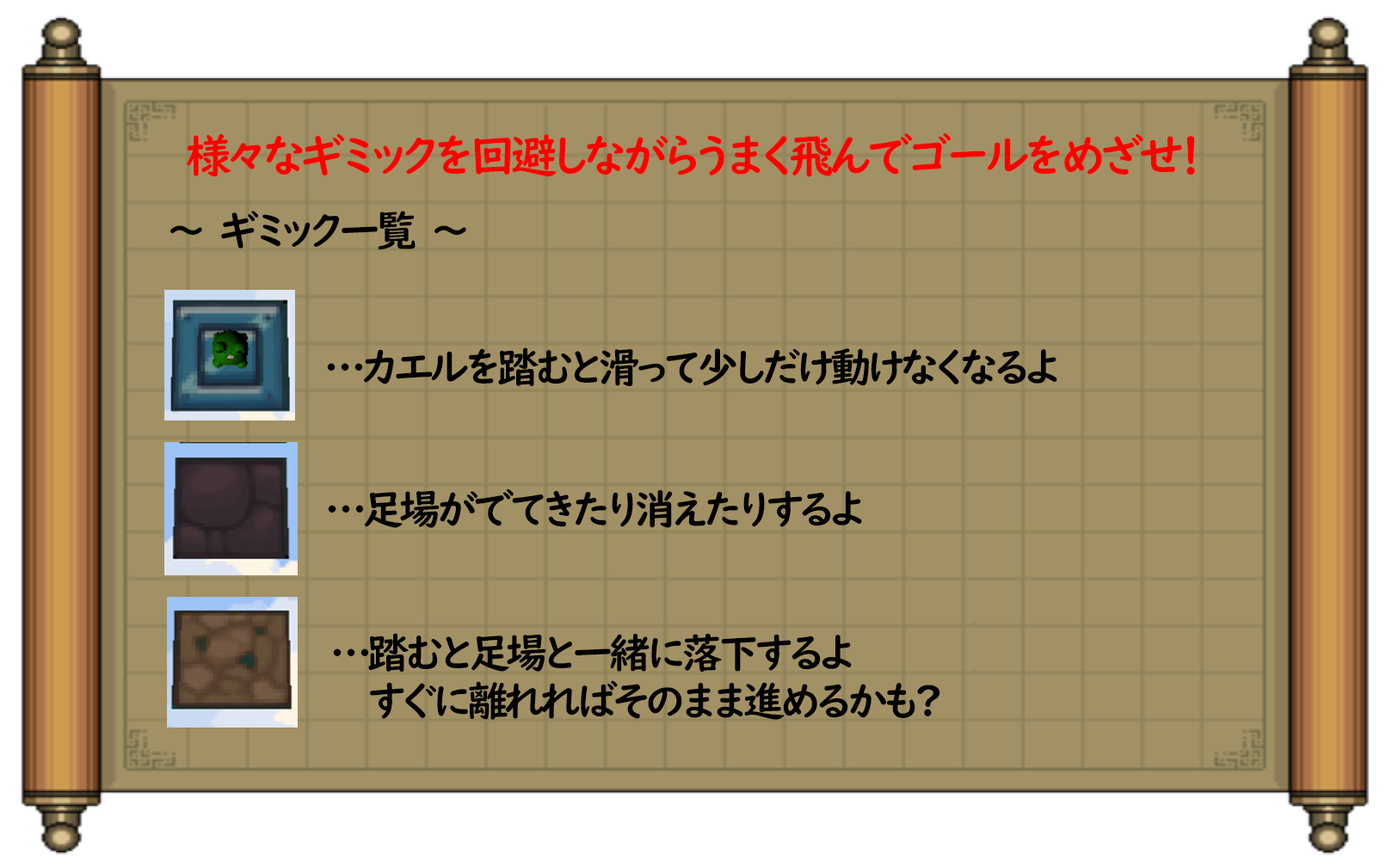
<style>
.page{position:relative;width:1386px;height:860px;background:#a29164}
.page>*{position:absolute;margin:0}
.t1{font:45.9px "UDDigiKyokashoNK-B";letter-spacing:-0.1em;color:#fb0000}
.t2{font:41.3px "UDDigiKyokashoNK-B";letter-spacing:-0.1em;color:#000000}
.t3{font:41.3px/48.2px "UDDigiKyokashoNK-B";letter-spacing:-0.1em;color:#000000}
</style>
<div class="page">
<p class="t1" style="left:187px;top:132px;width:1008px;height:45px">様々なギミックを回避しながらうまく飛んでゴールをめざせ！</p>
<p class="t2" style="left:170px;top:211px;width:296px;height:38px">～　ギミック一覧　～</p>
<p class="t2" style="left:327px;top:348px;width:730px;height:38px">…カエルを踏むと滑って少しだけ動けなくなるよ</p>
<p class="t2" style="left:328px;top:489px;width:534px;height:39px">…足場がでてきたり消えたりするよ</p>
<p class="t3" style="left:333px;top:633px;width:607px;height:87px">…踏むと足場と一緒に落下するよ<br>　　すぐに離れればそのまま進めるかも?</p>
</div>
